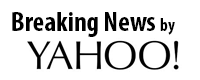
<style>
.page{position:relative;width:200px;height:80px;background:#ffffff}
.page>*{position:absolute;margin:0}
.t1{font:28px "MyriadPro-BoldCond";color:#000000}
.t2{font:18px "MyriadPro-BoldCond";color:#000000}
</style>
<div class="page">
<p class="t1" style="left:12px;top:12px;width:163px;height:25px">Breaking News <span class="t2">by</span></p>
</div>
